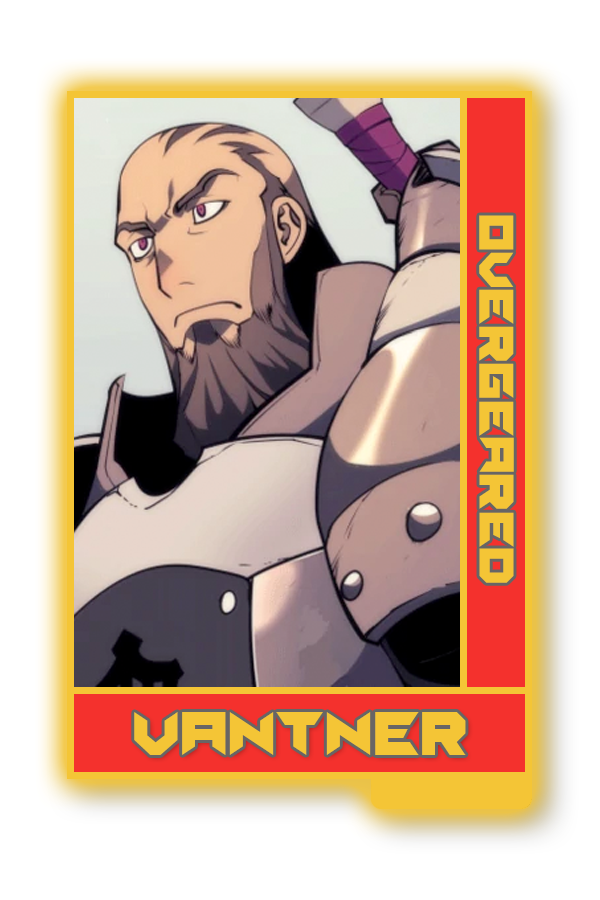
<style>
.page{position:relative;width:600px;height:900px;background:#ffffff}
.page>*{position:absolute;margin:0}
.t1{font:48.8px "Suggested-Regular";color:#f4c536}
.t2{font:62.5px "Suggested-Regular";color:#f4c536}
</style>
<div class="page">
<p class="t1" style="left:479px;top:215px;width:35px;height:368px;rotate:90deg">OVERGEARED</p>
<p class="t2" style="left:134px;top:712px;width:332px;height:43px">VANTNER</p>
</div>
